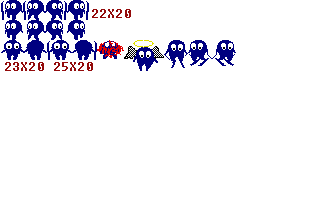
<style>
.page{position:relative;width:320px;height:200px;background:#ffffff}
.page>*{position:absolute;margin:0}
.t1{font:12px "Fixedsys";color:#930a0a;text-transform:uppercase}
</style>
<div class="page">
<p class="t1" style="left:92px;top:9px;width:39px;height:9px">22x20</p>
<p class="t1" style="left:5px;top:62px;width:39px;height:9px">23x20</p>
<p class="t1" style="left:54px;top:62px;width:39px;height:9px">25x20</p>
</div>
